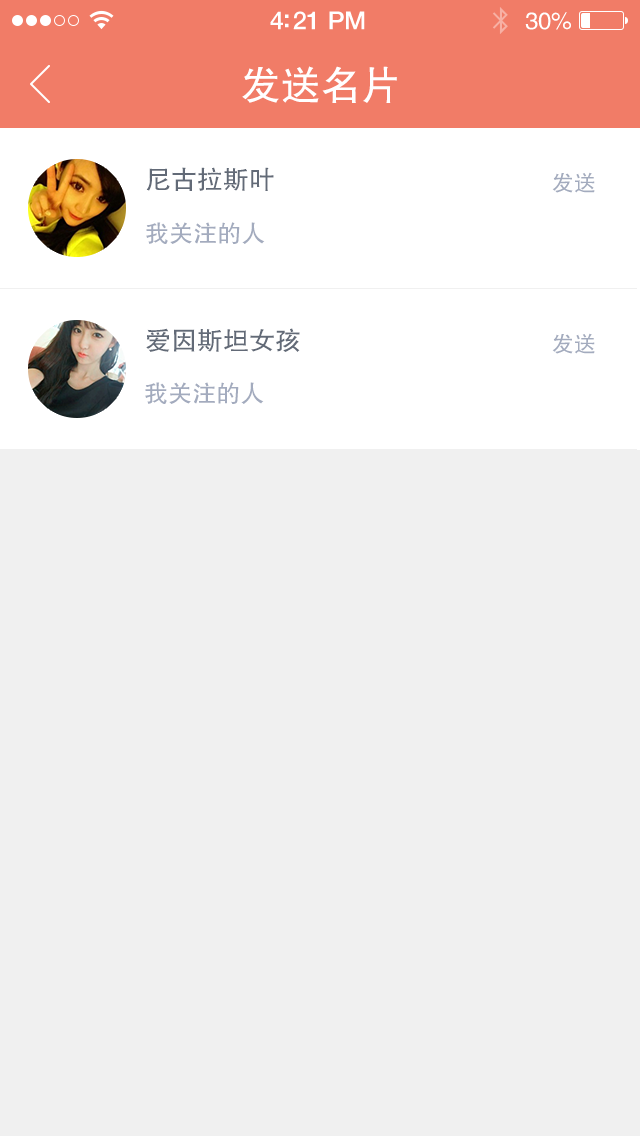
<style>
.page{position:relative;width:640px;height:1136px;background:#f0f0f0}
.page>*{position:absolute;margin:0}
.t1{font:25px "HelveticaNeue-Medium";letter-spacing:-0.02em;color:#ffffff}
.t2{font:24px "FZHTJW--GB1-0";letter-spacing:-0.02em;color:#ffffff}
.t3{font:40px "FZHTJW--GB1-0";color:#ffffff}
.t4{font:26px "FZHTJW--GB1-0";color:#626a77}
.t5{font:22px "FZHTJW--GB1-0";color:#a3abbe}
.t6{font:24px "FZHTJW--GB1-0";color:#a3abbe}
</style>
<div class="page">
<p class="t1" style="left:270px;top:11px;width:95px;height:19px">4:21 PM</p>
<p class="t2" style="left:525px;top:12px;width:46px;height:18px">30%</p>
<p class="t3" style="left:242px;top:66px;width:155px;height:37px">发送名片</p>
<p class="t4" style="left:146px;top:167px;width:128px;height:24px">尼古拉斯叶</p>
<p class="t5" style="left:552px;top:172px;width:43px;height:21px">发送</p>
<p class="t6" style="left:146px;top:222px;width:119px;height:22px">我关注的人</p>
<p class="t4" style="left:146px;top:328px;width:154px;height:24px">爱因斯坦女孩</p>
<p class="t5" style="left:552px;top:333px;width:43px;height:21px">发送</p>
<p class="t6" style="left:145px;top:382px;width:119px;height:22px">我关注的人</p>
</div>
